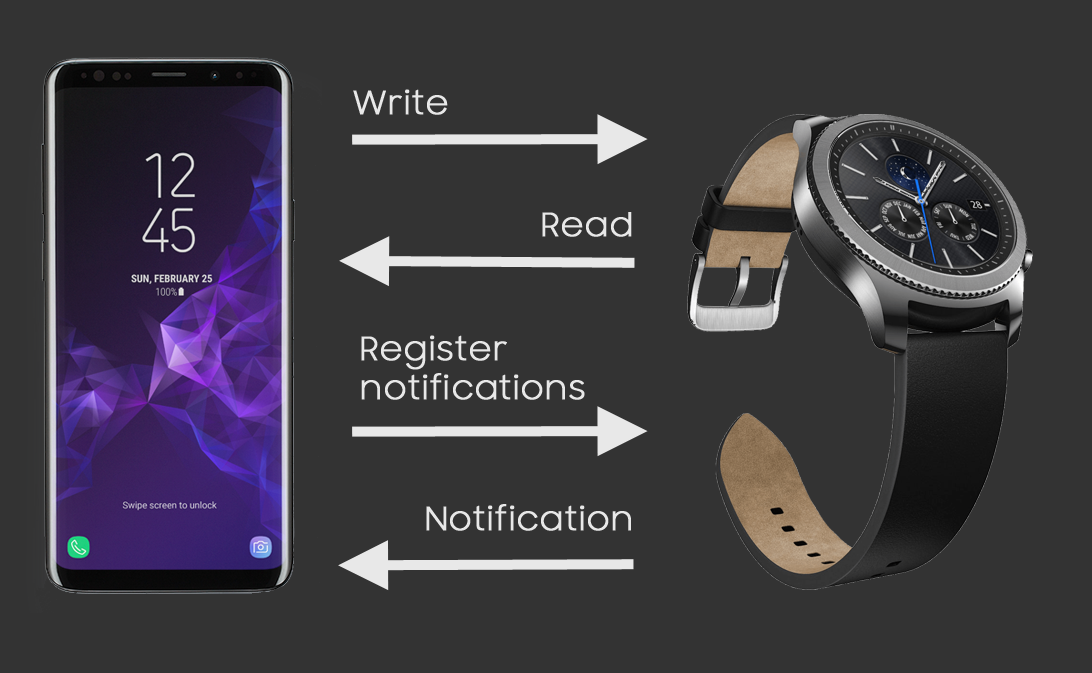
<style>
.page{position:relative;width:1092px;height:673px;background:#333333}
.page>*{position:absolute;margin:0}
.t1{font:32px "SamsungSharpSans-Regular";color:#e8e8e8;font-weight:bold}
</style>
<div class="page">
<p class="t1" style="left:353px;top:89px;width:95px;height:26px">Write</p>
<p class="t1" style="left:542px;top:212px;width:90px;height:25px">Read</p>
<p class="t1" style="left:361px;top:335px;width:224px;height:65px">Register <br>notifications</p>
<p class="t1" style="left:426px;top:504px;width:205px;height:27px">Notification</p>
</div>
